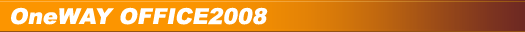
<style>
.page{position:relative;width:525px;height:32px;background:#fc9500}
.page>*{position:absolute;margin:0}
.t1{font:22px "Arial-Black";color:#ffffff;font-style:italic}
</style>
<div class="page">
<p class="t1" style="left:11px;top:7px;width:257px;height:18px">OneWAY OFFICE2008</p>
</div>
